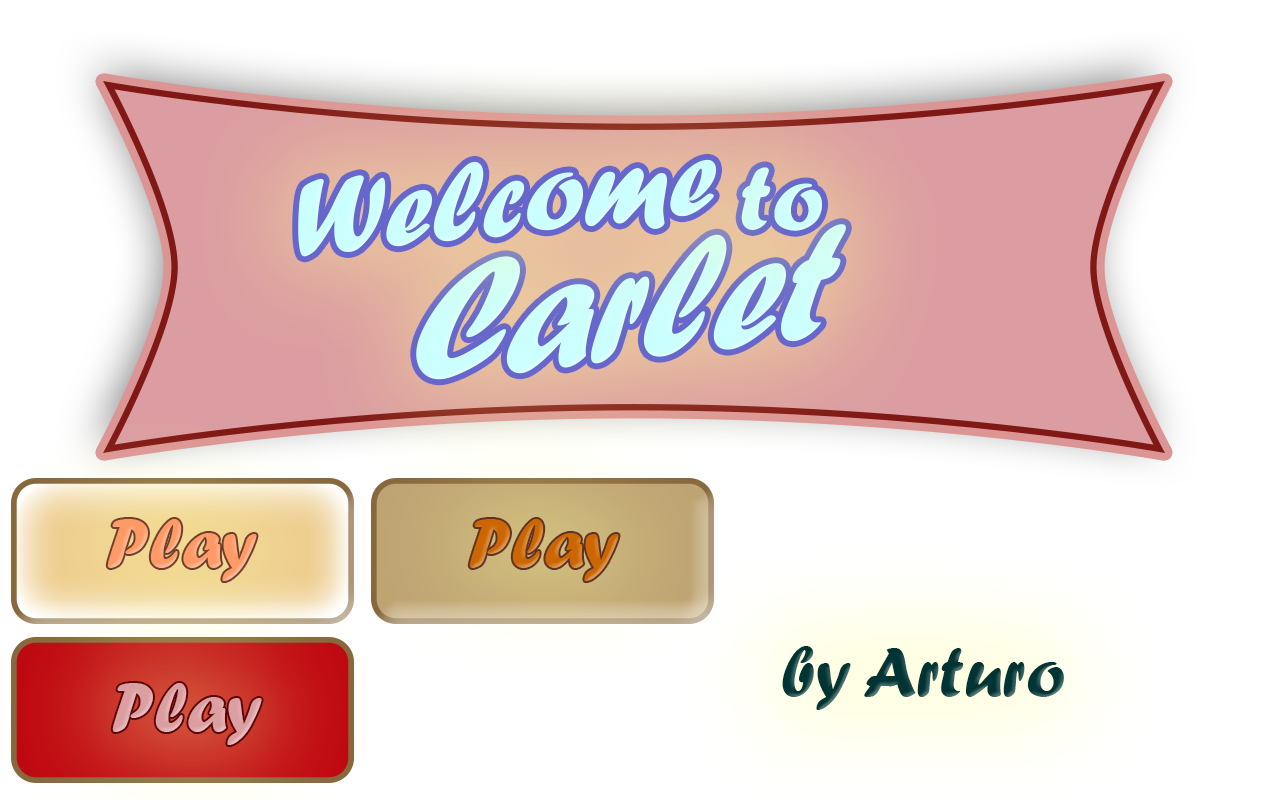
<style>
.page{position:relative;width:1280px;height:800px;background:#ffffff}
.page>*{position:absolute;margin:0}
.t1{font:114.3px "ForteMT";color:#ccffff}
.t2{font:95.8px "ForteMT";color:#ccffff}
.t3{font:180.3px "ForteMT";color:#ccffff;scale:0.86 1}
.t4{font:72px "ForteMT";color:#ff9966}
.t5{font:72px "ForteMT";color:#cc6600}
.t6{font:72px "ForteMT";color:#003333}
.t7{font:72px "ForteMT";color:#db9ea1}
</style>
<div class="page">
<p class="t1" style="left:298px;top:159px;width:418px;height:98px;rotate:-6deg">Welcome</p>
<p class="t2" style="left:741px;top:167px;width:81px;height:64px;rotate:-1deg">to</p>
<p class="t3" style="left:416px;top:224px;width:430px;height:156px;rotate:-6deg">Carlet</p>
<p class="t4" style="left:107px;top:519px;width:150px;height:62px">Play</p>
<p class="t5" style="left:469px;top:519px;width:150px;height:62px">Play</p>
<p class="t6" style="left:782px;top:646px;width:282px;height:64px">by Arturo</p>
<p class="t7" style="left:112px;top:683px;width:150px;height:62px">Play</p>
</div>
